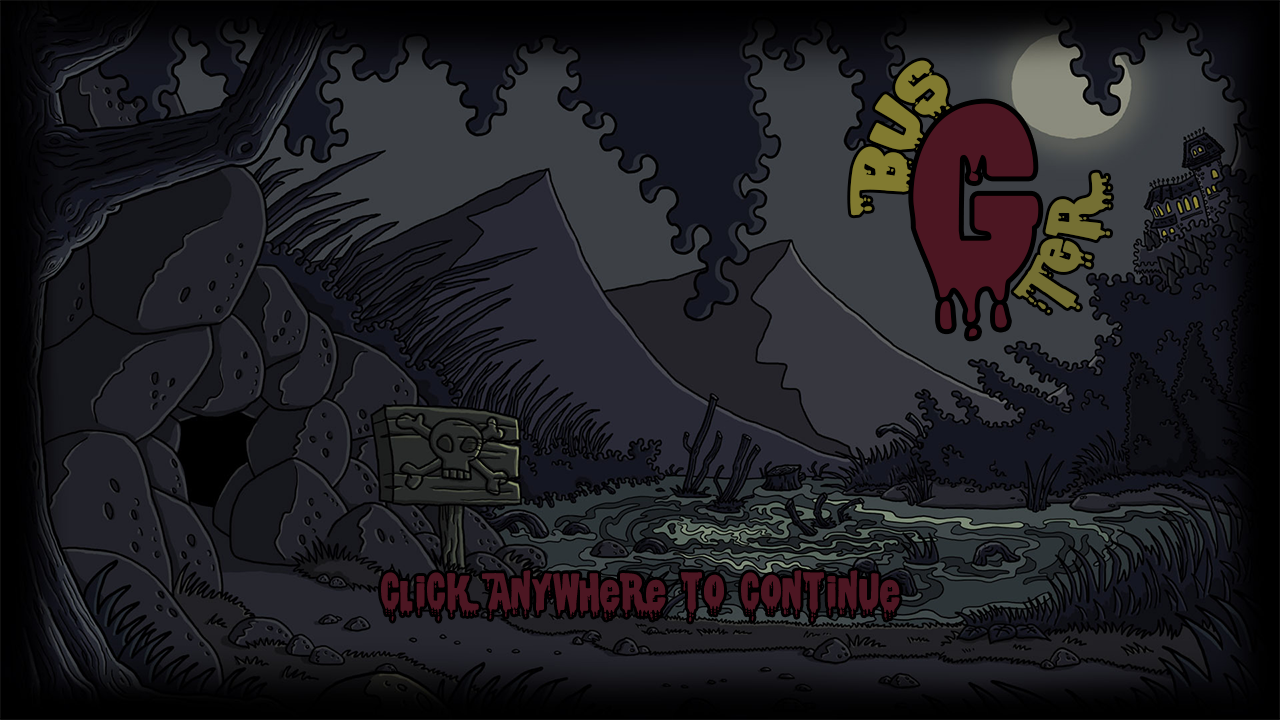
<style>
.page{position:relative;width:1280px;height:720px}
.page>*{position:absolute;margin:0}
.t1{font:66.9px "CSNPWDTNFI";color:#817a30}
.t2{font:275.3px "CSNPWDTNFI";color:#4c1622}
.t3{font:66.8px "CSNPWDTNFI";color:#746f33}
.t4{font:45.8px "CSNPWDTNFI";color:#4c1622}
</style>
<div class="page">
<p class="t1" style="left:850px;top:60px;width:101px;height:156px;rotate:-65deg">Bus</p>
<p class="t2" style="left:913px;top:103px;width:126px;height:234px">G</p>
<p class="t3" style="left:1013px;top:172px;width:99px;height:141px;rotate:-73deg">TER</p>
<p class="t4" style="left:381px;top:570px;width:519px;height:52px">Click anywhere to continue</p>
</div>
